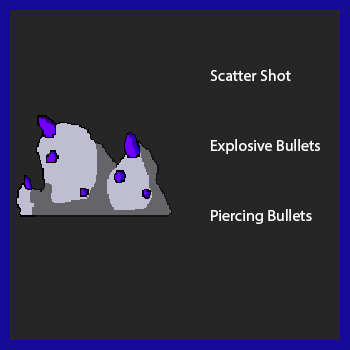
<style>
.page{position:relative;width:350px;height:350px;background:#262626}
.page>*{position:absolute;margin:0}
.t1{font:16px "MyriadPro-Regular";color:#ffffff}
</style>
<div class="page">
<p class="t1" style="left:210px;top:69px;width:81px;height:12px">Scatter Shot</p>
<p class="t1" style="left:211px;top:139px;width:109px;height:15px">Explosive Bullets</p>
<p class="t1" style="left:211px;top:209px;width:101px;height:15px">Piercing Bullets</p>
</div>
